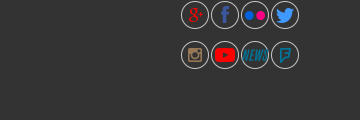
<style>
.page{position:relative;width:360px;height:120px;background:#333333}
.page>*{position:absolute;margin:0}
.t1{font:16px "AkzidenzGrotConBQ-MediumItalic";color:#00749a;text-transform:uppercase}
</style>
<div class="page">
<p class="t1" style="left:242px;top:49px;width:27px;height:12px">news</p>
</div>
